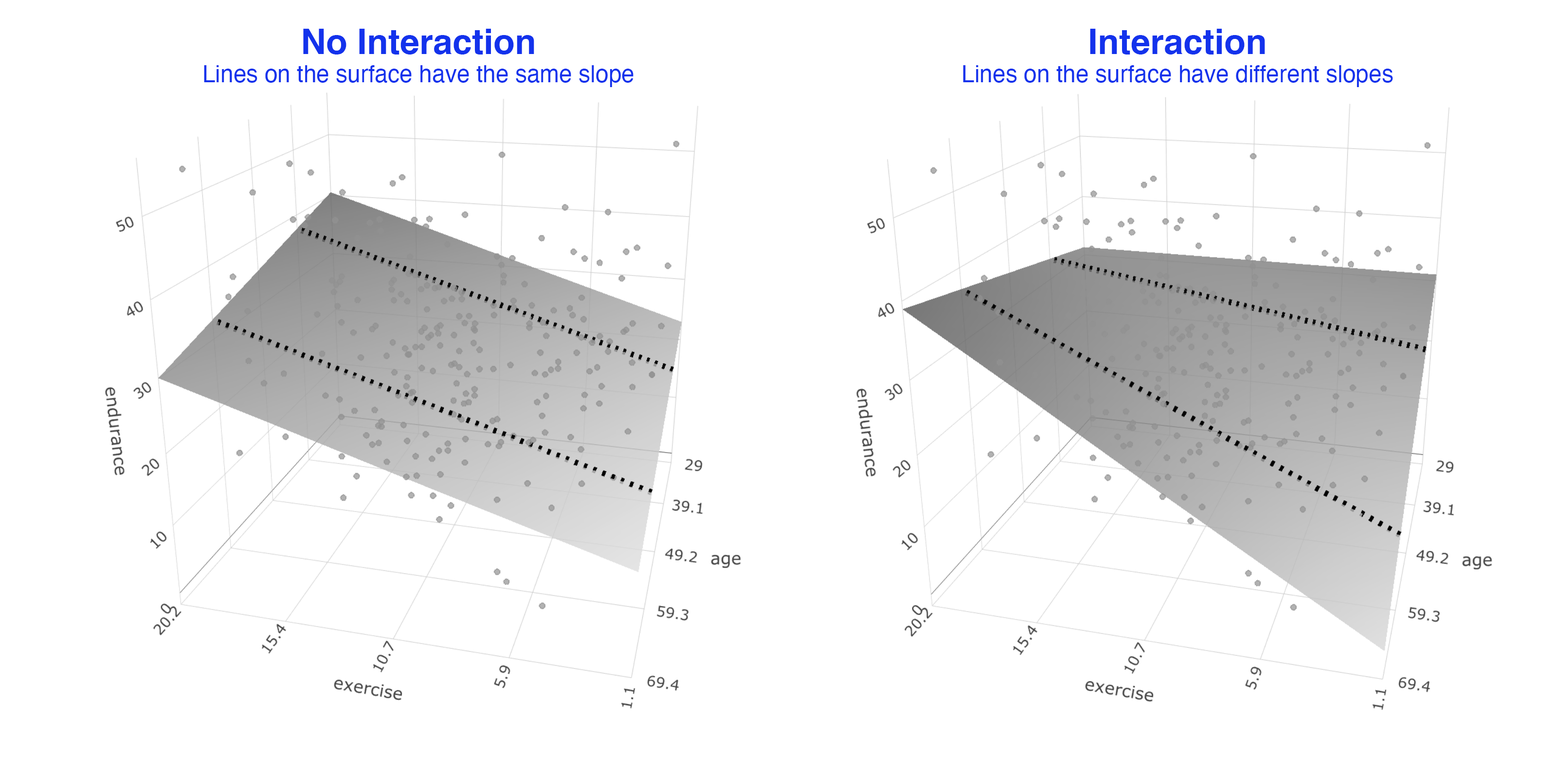
<style>
.page{position:relative;width:1557px;height:766px;background:#ffffff}
.page>*{position:absolute;margin:0}
.t1{font:23.4px "Helvetica";color:#1332ec}
.t2{font:35px "Helvetica-Bold";color:#1332ec}
</style>
<div class="page">
<p class="t1" style="left:204px;top:29px;width:430px;height:58px;text-align:center"><span class="t2">No Interaction<br></span>Lines on the surface have the same slope</p>
<p class="t1" style="left:963px;top:29px;width:430px;height:58px;text-align:center"><span class="t2">Interaction<br></span>Lines on the surface have different slopes</p>
</div>
